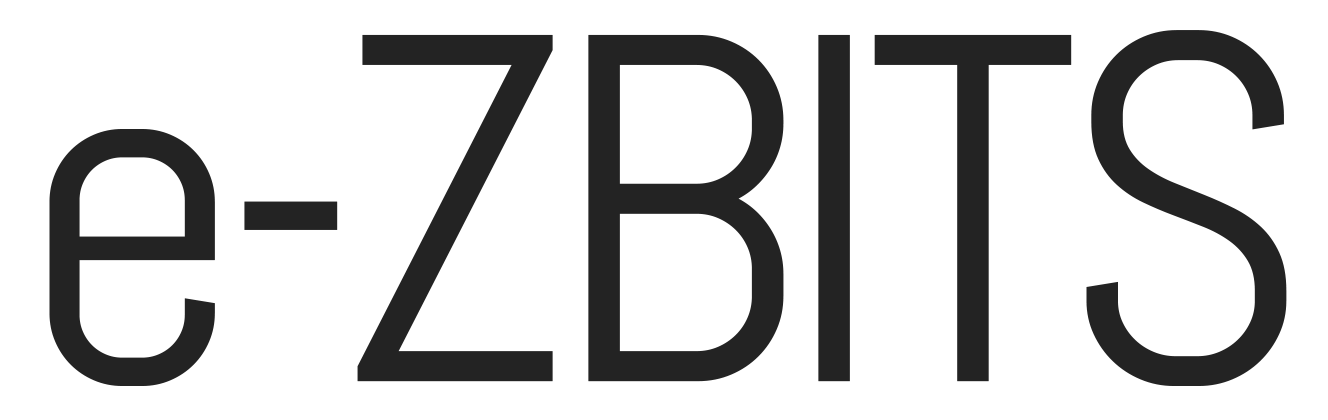
<style>
.page{position:relative;width:1328px;height:420px;background:#ffffff}
.page>*{position:absolute;margin:0}
.t1{font:493.6px "Abel-Regular";letter-spacing:-0.075em;color:#232323;font-weight:bold}
</style>
<div class="page">
<p class="t1" style="left:49px;top:30px;width:1238px;height:356px">e-ZBITS</p>
</div>
